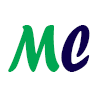
<style>
.page{position:relative;width:100px;height:100px;background:#ffffff}
.page>*{position:absolute;margin:0}
.t1{font:68.8px "ForteMT";letter-spacing:0.012em;color:#00a651;text-transform:uppercase;scale:0.71 1}
.t2{font:68.8px "ForteMT";letter-spacing:0.012em;color:#0d004c;text-transform:uppercase;scale:0.71 1}
</style>
<div class="page">
<p class="t1" style="left:8px;top:25px;width:82px;height:47px">M<span class="t2">C</span></p>
</div>
